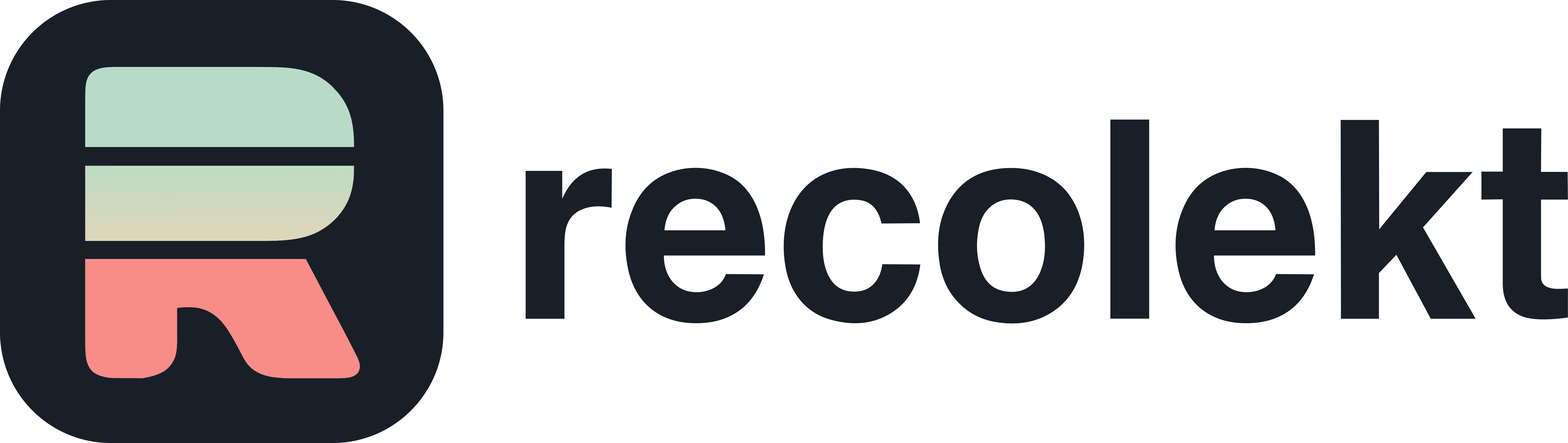
<style>
.page{position:relative;width:1568px;height:443px;background:#ffffff}
.page>*{position:absolute;margin:0}
.t1{font:277.1px "SansNormalOmbab11";color:#181f29}
</style>
<div class="page">
<p class="t1" style="left:525px;top:120px;width:1043px;height:204px">recolekt</p>
</div>
